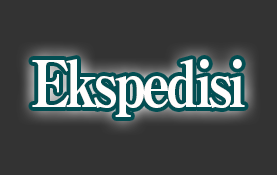
<style>
.page{position:relative;width:277px;height:175px;background:#333333}
.page>*{position:absolute;margin:0}
.t1{font:64px "RyuminPro-ExBold";letter-spacing:-0.08em;color:#fffdfc;scale:0.9 1}
</style>
<div class="page">
<p class="t1" style="left:32px;top:59px;width:213px;height:58px">Ekspedisi</p>
</div>
